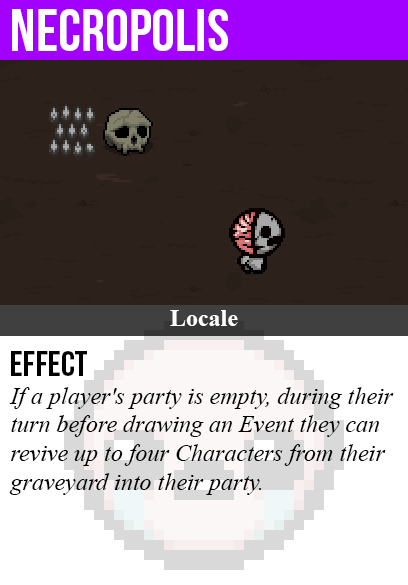
<style>
.page{position:relative;width:408px;height:585px;background:#2c211b}
.page>*{position:absolute;margin:0}
.t1{font:60px "BebasNeue";color:#ffffff}
.t2{font:24px "TimesNewRomanPS-BoldMT";color:#ffffff}
.t3{font:36px "BebasNeue";color:#000000}
.t4{font:24px "TimesNewRomanPS-ItalicMT";color:#000000}
</style>
<div class="page">
<p class="t1" style="left:12px;top:9px;width:216px;height:42px">necropolis</p>
<p class="t2" style="left:170px;top:310px;width:68px;height:16px">Locale</p>
<p class="t3" style="left:11px;top:351px;width:76px;height:25px">Effect</p>
<p class="t4" style="left:9px;top:387px;width:385px;height:108px">If a player's party is empty, during their<br>turn before drawing an Event they can<br>revive up to four Characters from their<br>graveyard into their party.</p>
</div>
